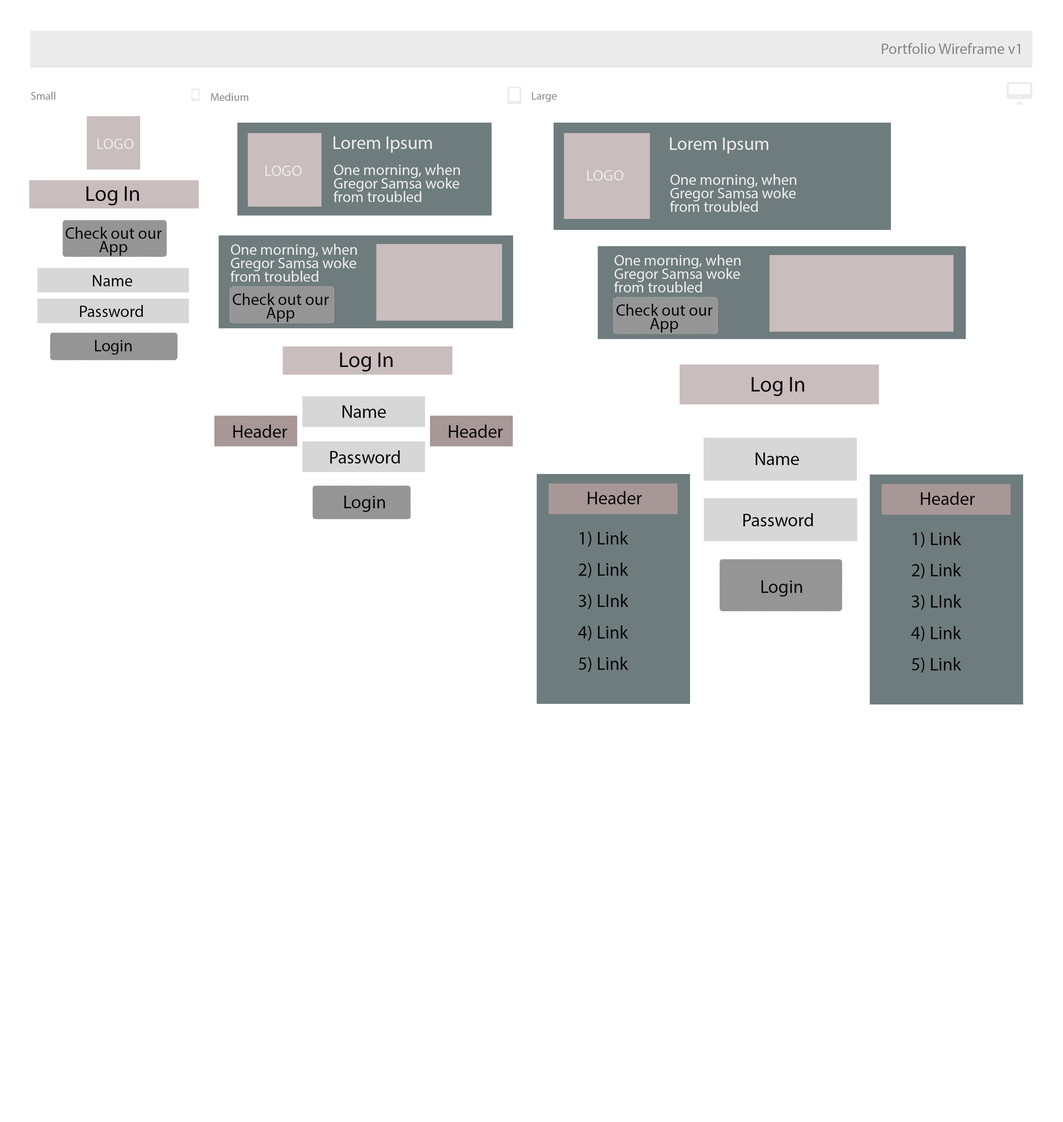
<style>
.page{position:relative;width:1063px;height:1122px;background:#ffffff}
.page>*{position:absolute;margin:0}
.t1{font:15.3px "MyriadPro-Regular";color:#878787}
.t2{font:11px "MyriadPro-Regular";color:#878787}
.t3{font:18.4px "MyriadPro-Regular";color:#ebebeb}
.t4{font:15.3px "MyriadPro-Regular";color:#ebebeb}
.t5{font:15.3px/13.5px "MyriadPro-Regular";color:#ebebeb}
.t6{font:21.5px "MyriadPro-Regular";color:#09080c}
.t7{font:16.6px/13.5px "MyriadPro-Regular";color:#09080c}
.t8{font:16.6px "MyriadPro-Regular";color:#09080c}
.t9{font:18.4px "MyriadPro-Regular";color:#09080c}
.t10{font:18.4px/30.7px "MyriadPro-Regular";color:#09080c}
</style>
<div class="page">
<p class="t1" style="left:881px;top:43px;width:139px;height:11px">Portfolio Wireframe v1</p>
<p class="t2" style="left:31px;top:92px;width:24px;height:8px">Small</p>
<p class="t2" style="left:211px;top:93px;width:37px;height:8px">Medium</p>
<p class="t2" style="left:532px;top:92px;width:24px;height:10px">Large</p>
<p class="t3" style="left:333px;top:136px;width:99px;height:17px">Lorem Ipsum</p>
<p class="t3" style="left:670px;top:137px;width:98px;height:17px">Lorem Ipsum</p>
<p class="t4" style="left:97px;top:139px;width:37px;height:10px">LOGO</p>
<p class="t4" style="left:265px;top:166px;width:37px;height:10px">LOGO</p>
<p class="t5" style="left:333px;top:164px;width:127px;height:38px">One morning, when Gregor Samsa woke from troubled</p>
<p class="t4" style="left:587px;top:170px;width:36px;height:11px">LOGO</p>
<p class="t5" style="left:670px;top:174px;width:126px;height:38px">One morning, when Gregor Samsa woke from troubled</p>
<p class="t6" style="left:86px;top:186px;width:53px;height:19px">Log In</p>
<p class="t7" style="left:66px;top:227px;width:96px;height:29px;text-align:center">Check out our App</p>
<p class="t5" style="left:230px;top:244px;width:127px;height:38px">One morning, when Gregor Samsa woke from troubled</p>
<p class="t5" style="left:614px;top:254px;width:126px;height:38px">One morning, when Gregor Samsa woke from troubled</p>
<p class="t8" style="left:93px;top:275px;width:39px;height:11px">Name</p>
<p class="t7" style="left:233px;top:293px;width:96px;height:29px;text-align:center">Check out our App</p>
<p class="t8" style="left:80px;top:305px;width:63px;height:12px">Password</p>
<p class="t7" style="left:616px;top:304px;width:96px;height:29px;text-align:center">Check out our App</p>
<p class="t8" style="left:95px;top:340px;width:37px;height:15px">Login</p>
<p class="t6" style="left:340px;top:353px;width:52px;height:19px">Log In</p>
<p class="t6" style="left:751px;top:377px;width:53px;height:19px">Log In</p>
<p class="t9" style="left:342px;top:405px;width:44px;height:13px">Name</p>
<p class="t9" style="left:233px;top:425px;width:54px;height:13px">Header</p>
<p class="t9" style="left:449px;top:425px;width:54px;height:13px">Header</p>
<p class="t9" style="left:330px;top:450px;width:70px;height:14px">Password</p>
<p class="t9" style="left:755px;top:453px;width:44px;height:12px">Name</p>
<p class="t9" style="left:344px;top:496px;width:41px;height:16px">Login</p>
<p class="t9" style="left:587px;top:491px;width:55px;height:13px">Header</p>
<p class="t9" style="left:920px;top:492px;width:55px;height:13px">Header</p>
<p class="t9" style="left:743px;top:513px;width:70px;height:13px">Password</p>
<p class="t10" style="left:578px;top:531px;width:51px;height:141px">1) Link<br>2) Link<br>3) LInk<br>4) Link<br>5) Link</p>
<p class="t10" style="left:911px;top:532px;width:50px;height:141px">1) Link<br>2) Link<br>3) LInk<br>4) Link<br>5) Link</p>
<p class="t9" style="left:761px;top:580px;width:41px;height:17px">Login</p>
</div>
